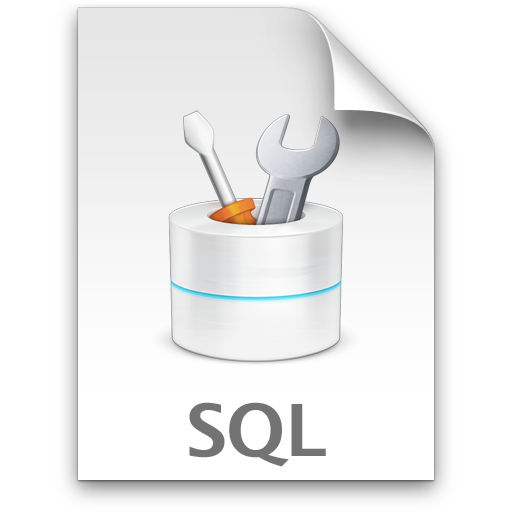
<style>
.page{position:relative;width:512px;height:512px;background:#ffffff}
.page>*{position:absolute;margin:0}
.t1{font:72px "LucidaGrande-Bold";letter-spacing:-0.01em;color:#737373}
</style>
<div class="page">
<p class="t1" style="left:189px;top:402px;width:137px;height:65px">SQL</p>
</div>
